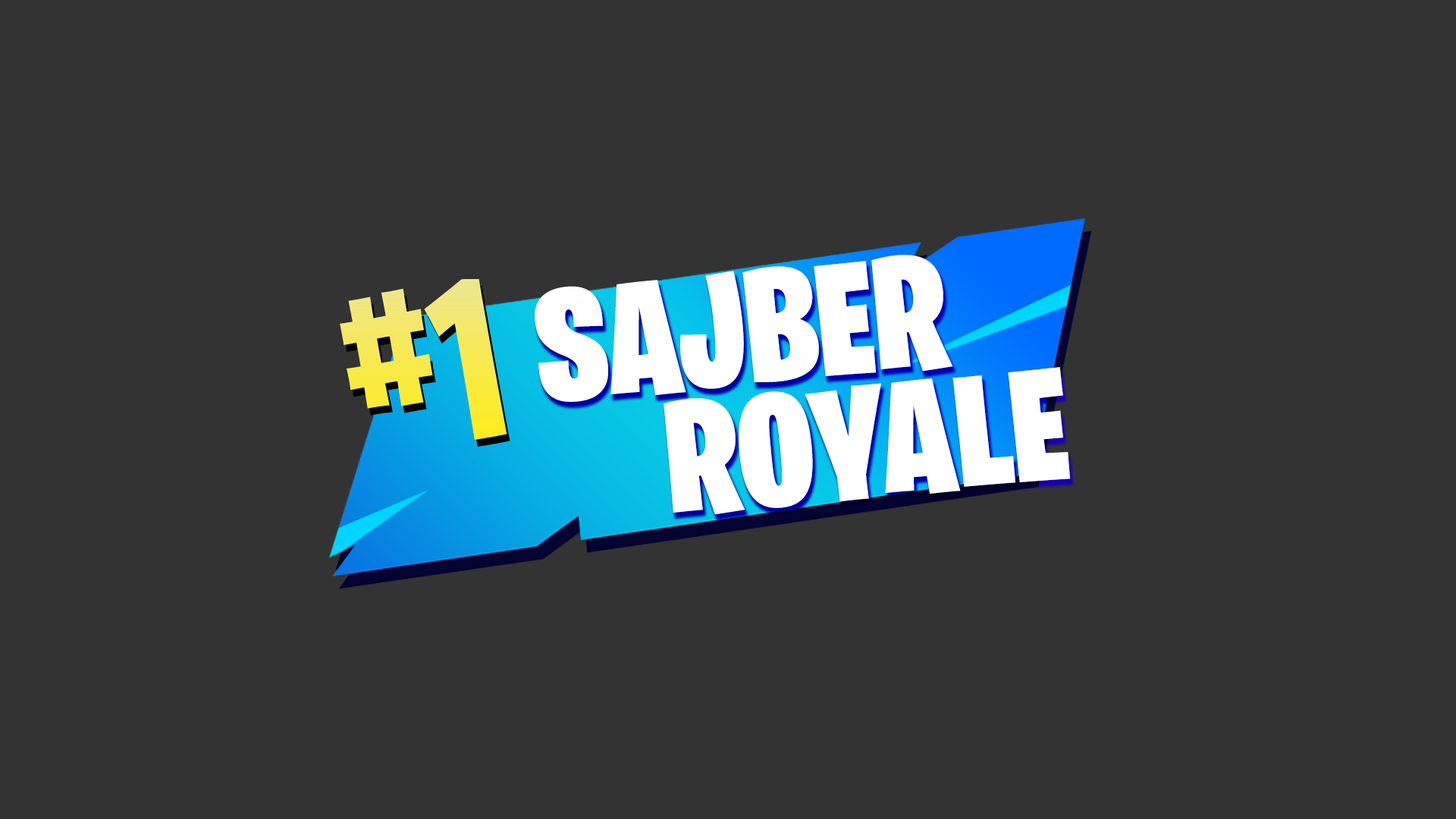
<style>
.page{position:relative;width:1456px;height:819px;background:#333333}
.page>*{position:absolute;margin:0}
.t1{font:159.2px "BurbankBigCondensed-Black";color:#ffffff}
.t2{font:229.3px "BurbankBigCondensed-Bold"}
</style>
<div class="page">
<p class="t1" style="left:535px;top:255px;width:418px;height:147px;rotate:-5deg">SAJBER</p>
<p class="t2" style="left:340px;top:279px;width:167px;height:161px;rotate:-10deg">#1</p>
<p class="t1" style="left:664px;top:367px;width:407px;height:148px;rotate:-5deg">ROYALE</p>
</div>
